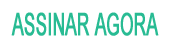
<style>
.page{position:relative;width:170px;height:50px;background:#ffffff}
.page>*{position:absolute;margin:0}
.t1{font:31.1px "ArialMT";color:#28bb93;font-weight:bold;scale:0.54 1}
</style>
<div class="page">
<p class="t1" style="left:11px;top:12px;width:148px;height:24px">ASSINAR AGORA</p>
</div>
